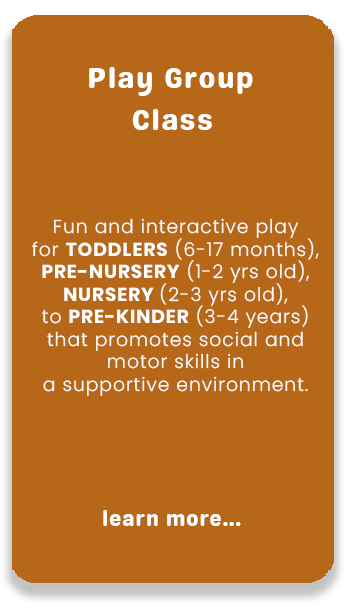
<style>
.page{position:relative;width:349px;height:608px;background:#b66818}
.page>*{position:absolute;margin:0}
.t1{font:29.2px "GentySans-Regular";letter-spacing:0.05em;color:#ffffff}
.t2{font:18.7px "Poppins-Light";letter-spacing:0.05em;color:#ffffff}
.t3{font:18.7px "Poppins-Bold";letter-spacing:0.05em;color:#ffffff}
.t4{font:20.8px "GentySans-Regular";letter-spacing:0.05em;color:#ffffff}
</style>
<div class="page">
<p class="t1" style="left:89px;top:67px;width:164px;height:29px">Play Group</p>
<p class="t1" style="left:132px;top:109px;width:80px;height:21px">Class</p>
<p class="t2" style="left:32px;top:218px;width:287px;height:178px;text-align:center">Fun and interactive play<br>for <span class="t3">TODDLERS</span> (6-17 months),<br><span class="t3">PRE-NURSERY</span> (1-2 yrs old),<br><span class="t3">NURSERY </span>(2-3 yrs old),<br>to <span class="t3">PRE-KINDER</span> (3-4 years)<br>that promotes social and<br>motor skills in<br>a supportive environment.</p>
<p class="t4" style="left:103px;top:510px;width:138px;height:16px">learn more...</p>
</div>
